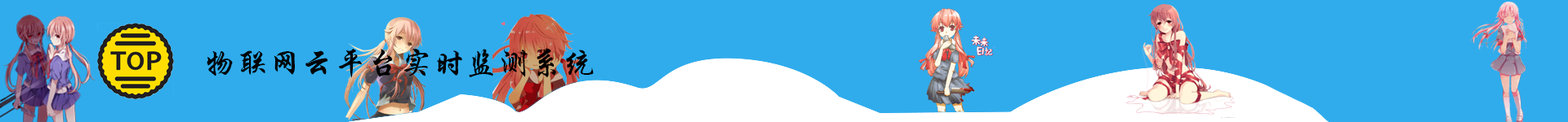
<style>
.page{position:relative;width:1568px;height:122px;background:#30acec}
.page>*{position:absolute;margin:0}
.t1{font:32.7px "STXingkai";color:#000000}
</style>
<div class="page">
<p class="t1" style="left:207px;top:48px;width:387px;height:30px">物联网云平台实时监测系统</p>
</div>
